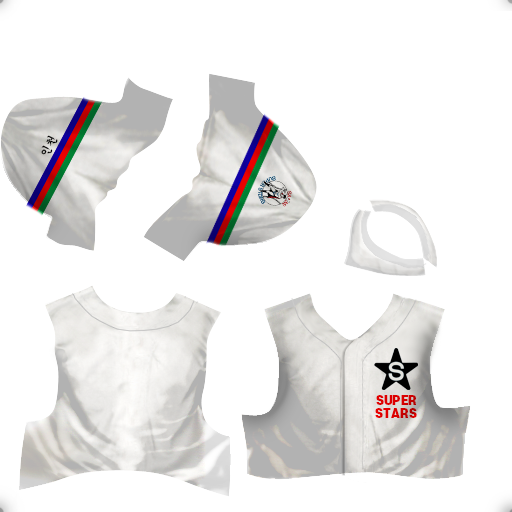
<style>
.page{position:relative;width:512px;height:512px;background:#ffffff}
.page>*{position:absolute;margin:0}
.t1{font:12px "H2gsrB";color:#000000}
.t2{font:12px/13px "S-CoreDream-9Black";color:#dc0000}
</style>
<div class="page">
<p class="t1" style="left:41px;top:135px;width:17px;height:20px;rotate:-64deg">인천</p>
<p class="t2" style="left:375px;top:395px;width:42px;height:23px;text-align:justify">SUPER<br>STARS</p>
</div>
